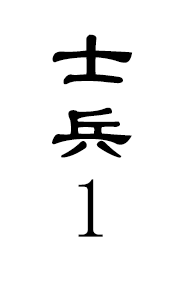
<style>
.page{position:relative;width:184px;height:284px;background:#ffffff}
.page>*{position:absolute;margin:0}
.t1{font:84.7px "LiSu";color:#000000}
</style>
<div class="page">
<p class="t1" style="left:52px;top:34px;width:81px;height:51px">士</p>
<p class="t1" style="left:52px;top:107px;width:80px;height:51px">兵</p>
<p class="t1" style="left:78px;top:179px;width:25px;height:58px">1</p>
</div>
